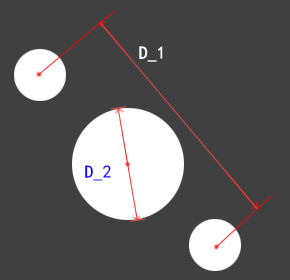
<style>
.page{position:relative;width:290px;height:280px;background:#404040}
.page>*{position:absolute;margin:0}
.t1{font:18px "SimHei";color:#ffffff}
.t2{font:18px "SimHei";color:#1504fb}
</style>
<div class="page">
<p class="t1" style="left:139px;top:46px;width:24px;height:16px">D_1</p>
<p class="t2" style="left:85px;top:165px;width:26px;height:16px">D_2</p>
</div>
